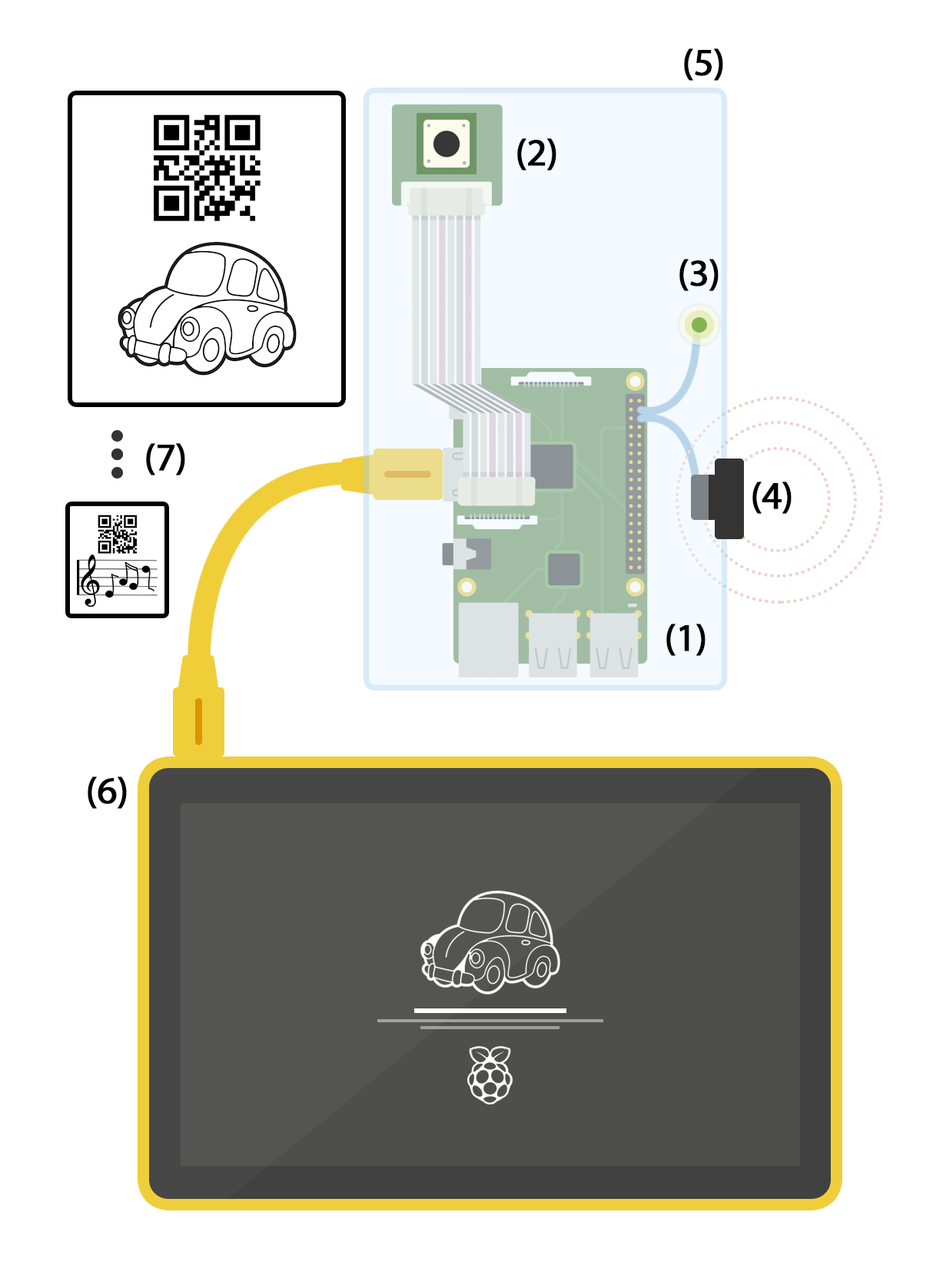
<style>
.page{position:relative;width:933px;height:1278px;background:#ffffff}
.page>*{position:absolute;margin:0}
.t1{font:38.4px "MyriadPro-Regular";letter-spacing:-0.02em;color:#000000;font-weight:bold}
</style>
<div class="page">
<p class="t1" style="left:684px;top:48px;width:39px;height:33px">(5)</p>
<p class="t1" style="left:517px;top:138px;width:39px;height:33px">(2)</p>
<p class="t1" style="left:679px;top:259px;width:39px;height:32px">(3)</p>
<p class="t1" style="left:146px;top:443px;width:39px;height:33px">(7)</p>
<p class="t1" style="left:752px;top:482px;width:39px;height:32px">(4)</p>
<p class="t1" style="left:666px;top:624px;width:39px;height:32px">(1)</p>
<p class="t1" style="left:88px;top:777px;width:39px;height:32px">(6)</p>
</div>
